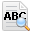
<style>
.page{position:relative;width:32px;height:32px;background:#ffffff}
.page>*{position:absolute;margin:0}
.t1{font:11px "Arial-BoldMT";color:#000000}
</style>
<div class="page">
<p class="t1" style="left:4px;top:12px;width:22px;height:8px">ABC</p>
</div>
